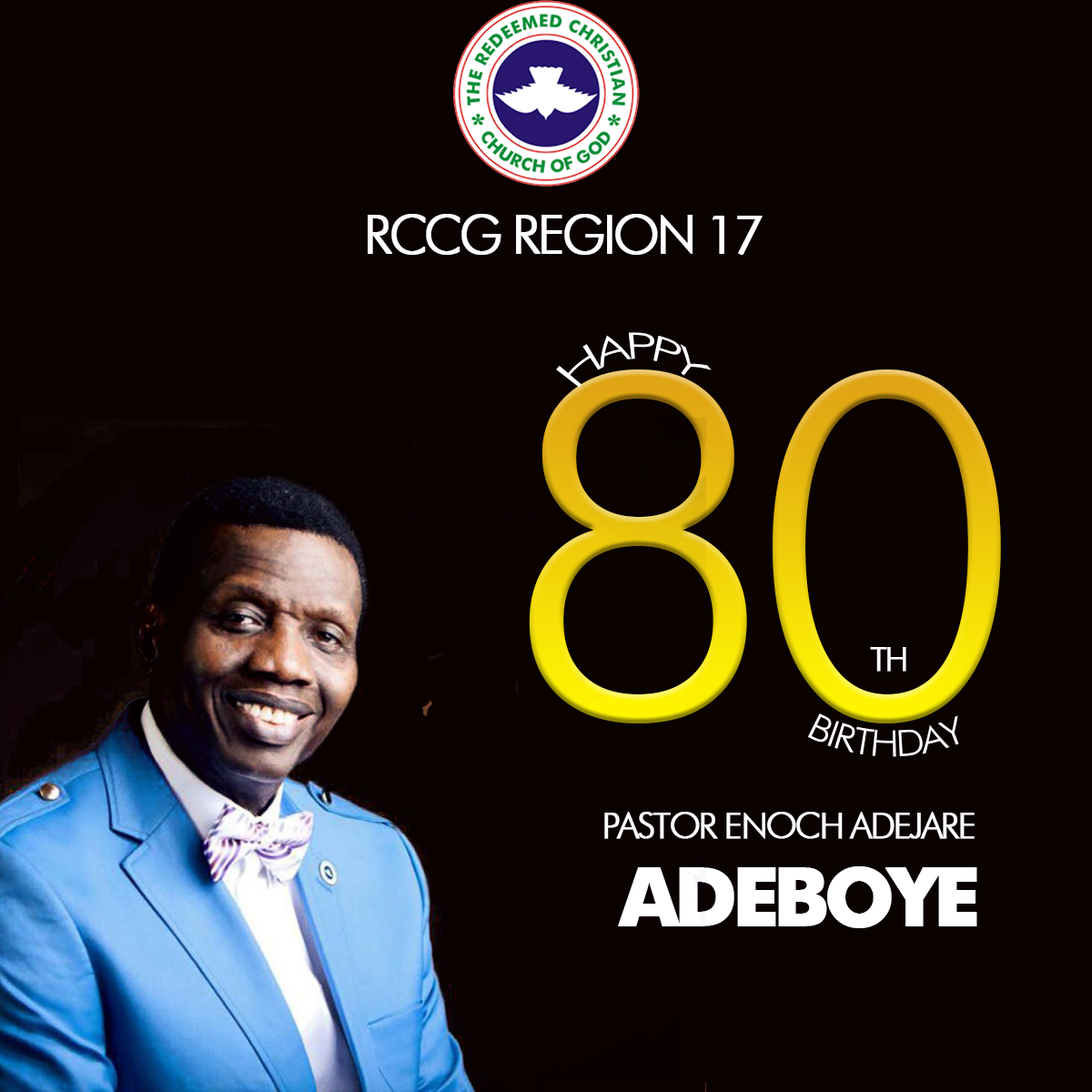
<style>
.page{position:relative;width:1092px;height:1092px;background:#0a0101}
.page>*{position:absolute;margin:0}
.t1{font:53.2px "FuturaBT-Light";letter-spacing:-0.08em;color:#ffffff;text-transform:uppercase;font-weight:bold}
.t2{font:35.9px "FuturaBT-Light";letter-spacing:-0.08em;color:#ffffff;text-transform:uppercase}
.t3{font:474.5px "FuturaBT-Light";letter-spacing:-0.08em;text-transform:uppercase;font-weight:bold}
.t4{font:33.4px "FuturaBT-Light";letter-spacing:-0.08em;color:#ffffff;text-transform:uppercase;font-weight:bold}
.t5{font:35.9px "FuturaBT-Light";letter-spacing:-0.08em;color:#ffffff;text-transform:uppercase;font-weight:bold}
.t6{font:81.1px "Futura-Bold";letter-spacing:-0.08em;color:#ffffff;text-transform:uppercase;font-weight:bold}
</style>
<div class="page">
<p class="t1" style="left:368px;top:214px;width:395px;height:41px">rccg region 17</p>
<p class="t2" style="left:556px;top:332px;width:156px;height:56px">happy</p>
<p class="t3" style="left:529px;top:369px;width:472px;height:354px">80</p>
<p class="t4" style="left:870px;top:647px;width:36px;height:25px">th</p>
<p class="t2" style="left:807px;top:713px;width:152px;height:44px">birthday</p>
<p class="t5" style="left:604px;top:812px;width:371px;height:27px">pastor enoch adejare</p>
<p class="t6" style="left:618px;top:866px;width:359px;height:62px">adeboye</p>
</div>
